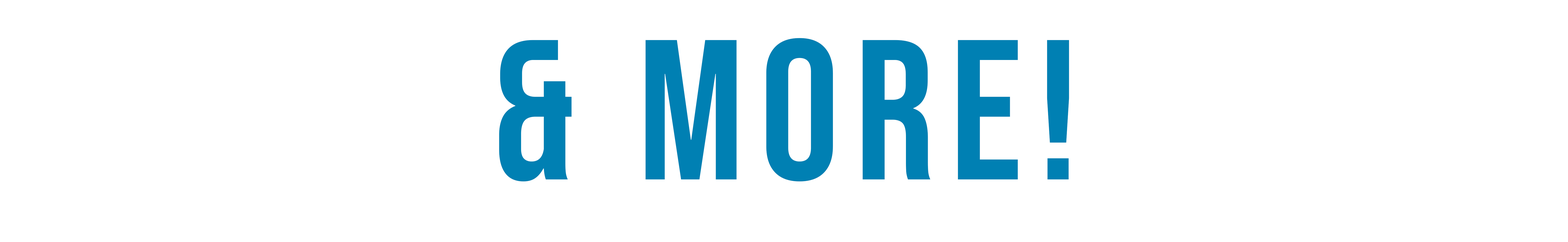
<style>
.page{position:relative;width:1568px;height:242px;background:#ffffff}
.page>*{position:absolute;margin:0}
.t1{font:199.5px "BebasNeue-Regular";letter-spacing:0.075em;color:#0080b3}
</style>
<div class="page">
<p class="t1" style="left:499px;top:38px;width:570px;height:144px">&amp; More!</p>
</div>
